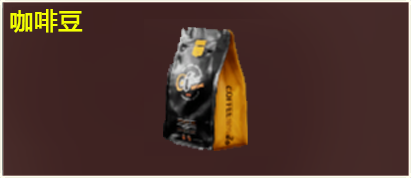
<style>
.page{position:relative;width:411px;height:178px}
.page>*{position:absolute;margin:0}
.t1{font:24px "MicrosoftYaHeiUI";color:#f4ff00;font-weight:bold}
</style>
<div class="page">
<p class="t1" style="left:10px;top:9px;width:73px;height:24px">咖啡豆</p>
</div>
